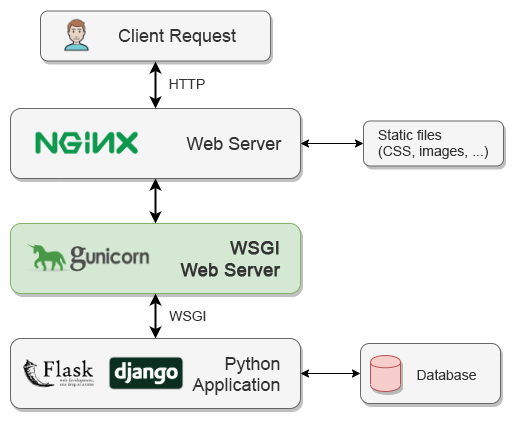
<style>
.page{position:relative;width:516px;height:431px;background:#ffffff}
.page>*{position:absolute;margin:0}
.t1{font:18px "ArialMT";color:#333333}
.t2{font:14px "ArialMT";color:#333333}
</style>
<div class="page">
<p class="t1" style="left:118px;top:29px;width:118px;height:17px">Client Request</p>
<p class="t2" style="left:169px;top:79px;width:36px;height:10px">HTTP</p>
<p class="t2" style="left:378px;top:129px;width:110px;height:30px">Static files<br>(CSS, images, ...)</p>
<p class="t2" style="left:169px;top:311px;width:37px;height:10px">WSGI</p>
<p class="t1" style="left:192px;top:357px;width:88px;height:38px;text-align:right">Python<br>Application</p>
<p class="t2" style="left:417px;top:369px;width:59px;height:11px">Database</p>
</div>
